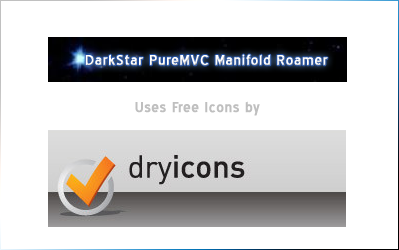
<style>
.page{position:relative;width:399px;height:250px;background:#ffffff}
.page>*{position:absolute;margin:0}
.t1{font:18px "BlueHighway";letter-spacing:0.025em;color:#ffffff;font-weight:bold}
.t2{font:18px "BlueHighway";letter-spacing:0.025em;color:#bfbfbf;font-weight:bold}
</style>
<div class="page">
<p class="t1" style="left:85px;top:54px;width:243px;height:12px">DarkStar PureMVC Manifold Roamer</p>
<p class="t2" style="left:135px;top:101px;width:125px;height:15px">Uses Free Icons by</p>
</div>
